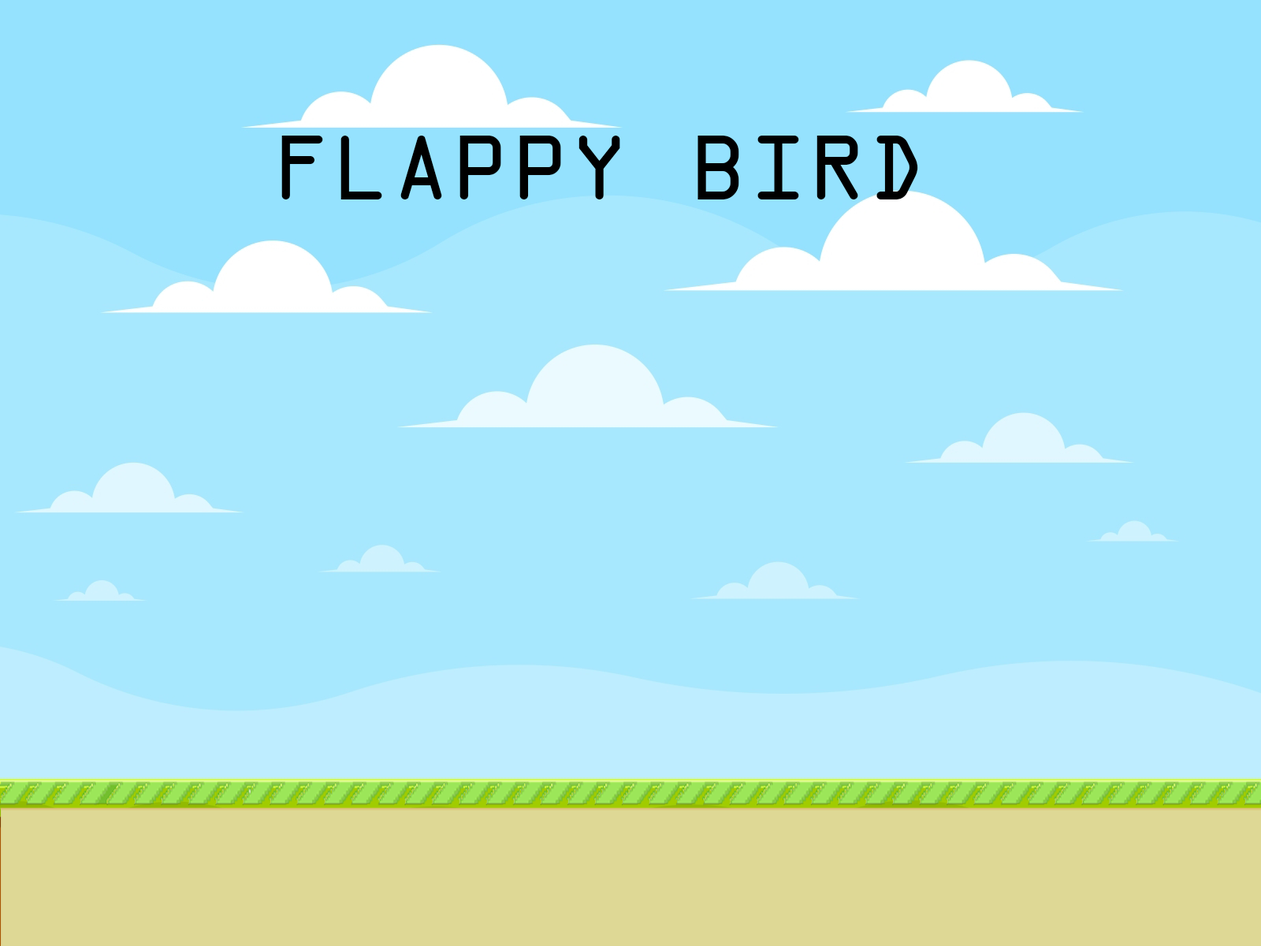
<style>
.page{position:relative;width:1261px;height:946px;background:#a7e8fe}
.page>*{position:absolute;margin:0}
.t1{font:98.5px "OCRAExtended";color:#000000}
</style>
<div class="page">
<p class="t1" style="left:281px;top:136px;width:637px;height:63px">FLAPPY BIRD</p>
</div>
